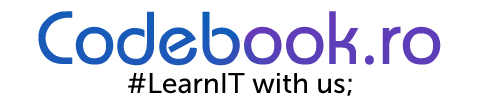
<style>
.page{position:relative;width:500px;height:109px;background:#ffffff}
.page>*{position:absolute;margin:0}
.t1{font:75.2px "Bauhaus"}
.t2{font:28.2px "MuseoSans-500";color:#000000}
</style>
<div class="page">
<p class="t1" style="left:38px;top:11px;width:403px;height:55px">Codebook.ro</p>
<p class="t2" style="left:128px;top:73px;width:224px;height:23px">#LearnIT with us;</p>
</div>
